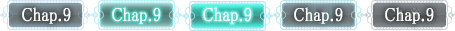
<style>
.page{position:relative;width:455px;height:31px}
.page>*{position:absolute;margin:0}
.t1{font:19px "MS-PMincho";color:#ffffff;font-weight:bold;scale:0.84 1}
</style>
<div class="page">
<p class="t1" style="left:22px;top:7px;width:49px;height:17px">Chap.9</p>
<p class="t1" style="left:112px;top:7px;width:49px;height:17px">Chap.9</p>
<p class="t1" style="left:203px;top:7px;width:49px;height:17px">Chap.9</p>
<p class="t1" style="left:294px;top:7px;width:49px;height:17px">Chap.9</p>
<p class="t1" style="left:385px;top:7px;width:49px;height:17px">Chap.9</p>
</div>
